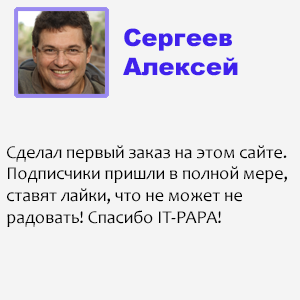
<style>
.page{position:relative;width:300px;height:300px;background:#f4f4f4}
.page>*{position:absolute;margin:0}
.t1{font:24px "Arial-Black";color:#4021ec}
.t2{font:18px "Candara";color:#000000}
</style>
<div class="page">
<p class="t1" style="left:123px;top:28px;width:115px;height:48px">Сергеев<br>Алексей</p>
<p class="t2" style="left:7px;top:145px;width:280px;height:82px">Сделал первый заказ на этом сайте.<br>Подписчики пришли в полной мере,<br>ставят лайки, что не может не <br>радовать! Спасибо IT-PAPA!</p>
</div>
